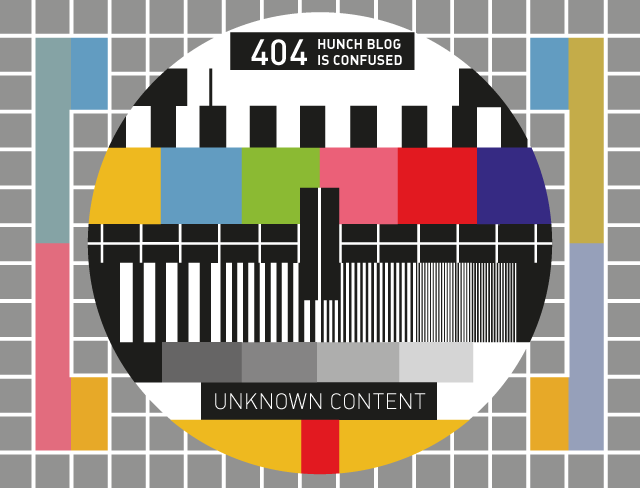
<style>
.page{position:relative;width:640px;height:488px;background:#929291}
.page>*{position:absolute;margin:0}
.t1{font:36px "DIN-Medium";color:#ffffff}
.t2{font:14px/16px "DIN-BoldAlternate";color:#ffffff}
.t3{font:22px "DIN-LightAlternate";color:#ffffff}
</style>
<div class="page">
<p class="t1" style="left:251px;top:39px;width:56px;height:27px">404</p>
<p class="t2" style="left:318px;top:39px;width:84px;height:26px">HUNCH BLOG<br>IS CONFUSED</p>
<p class="t3" style="left:215px;top:393px;width:211px;height:17px">UNKNOWN CONTENT</p>
</div>
